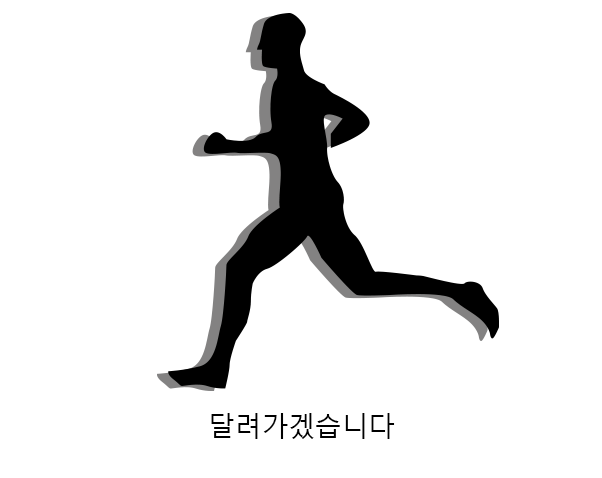
<style>
.page{position:relative;width:602px;height:478px;background:#ffffff}
.page>*{position:absolute;margin:0}
.t1{font:26.7px "MalgunGothic";color:#000000}
</style>
<div class="page">
<p class="t1" style="left:211px;top:413px;width:184px;height:26px">달려가겠습니다</p>
</div>
